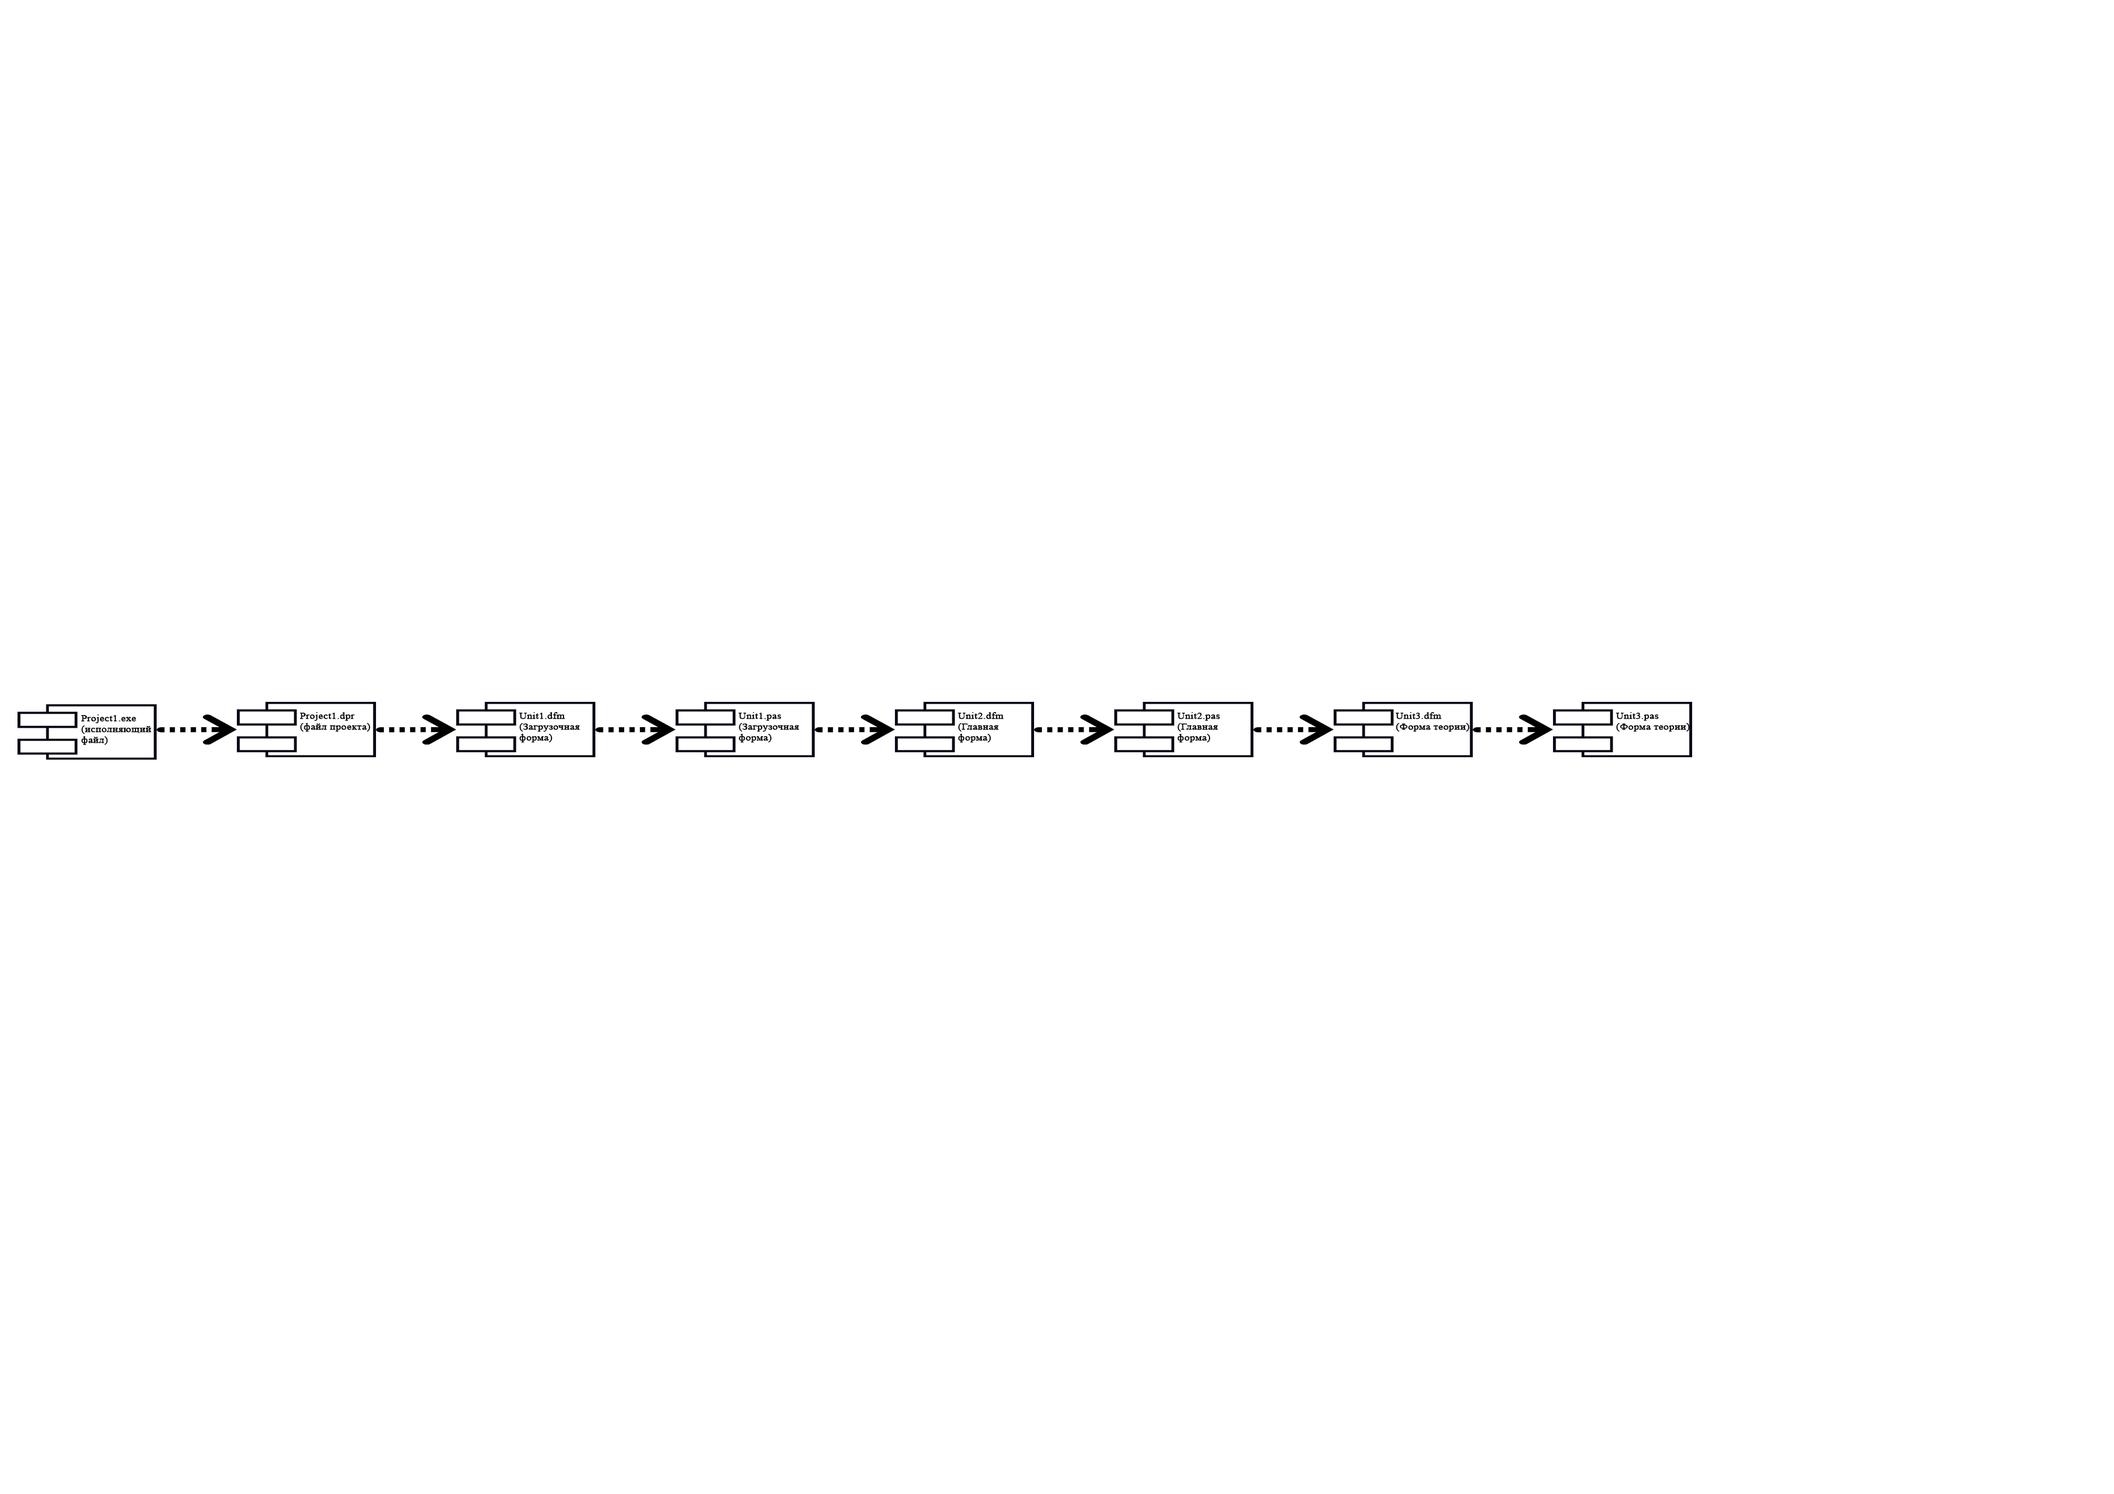
<style>
.page{position:relative;width:2114px;height:1494px;background:#ffffff}
.page>*{position:absolute;margin:0}
.t1{font:9px "TimesNewRomanPSMT";color:#000000;font-weight:bold;scale:1.16 1}
</style>
<div class="page">
<p class="t1" style="left:299px;top:712px;width:72px;height:20px">Project1.dpr<br>(файл проекта)</p>
<p class="t1" style="left:519px;top:712px;width:61px;height:31px">Unit1.dfm<br>(Загрузочная <br>форма)</p>
<p class="t1" style="left:738px;top:712px;width:61px;height:31px">Unit1.pas<br>(Загрузочная <br>форма)</p>
<p class="t1" style="left:958px;top:712px;width:46px;height:31px">Unit2.dfm<br>(Главная <br>форма)</p>
<p class="t1" style="left:1177px;top:712px;width:43px;height:31px">Unit2.pas<br>(Главная <br>форма)</p>
<p class="t1" style="left:1396px;top:712px;width:74px;height:20px">Unit3.dfm<br>(Форма теории)</p>
<p class="t1" style="left:1616px;top:712px;width:74px;height:20px">Unit3.pas<br>(Форма теории)</p>
<p class="t1" style="left:81px;top:715px;width:70px;height:30px">Project1.exe<br>(исполняющий <br>файл)</p>
</div>
